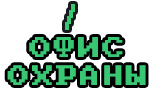
<style>
.page{position:relative;width:164px;height:92px;background:#ffffff}
.page>*{position:absolute;margin:0}
.t1{font:22.7px "PxPlus_IBM_BIOS";letter-spacing:0.075em;color:#39c773}
.t2{font:22.4px "PxPlus_IBM_BIOS";letter-spacing:0.075em;color:#39c773}
</style>
<div class="page">
<p class="t1" style="left:29px;top:37px;width:94px;height:20px">ОФИС</p>
<p class="t2" style="left:7px;top:65px;width:139px;height:20px">ОХРАНЫ</p>
</div>
